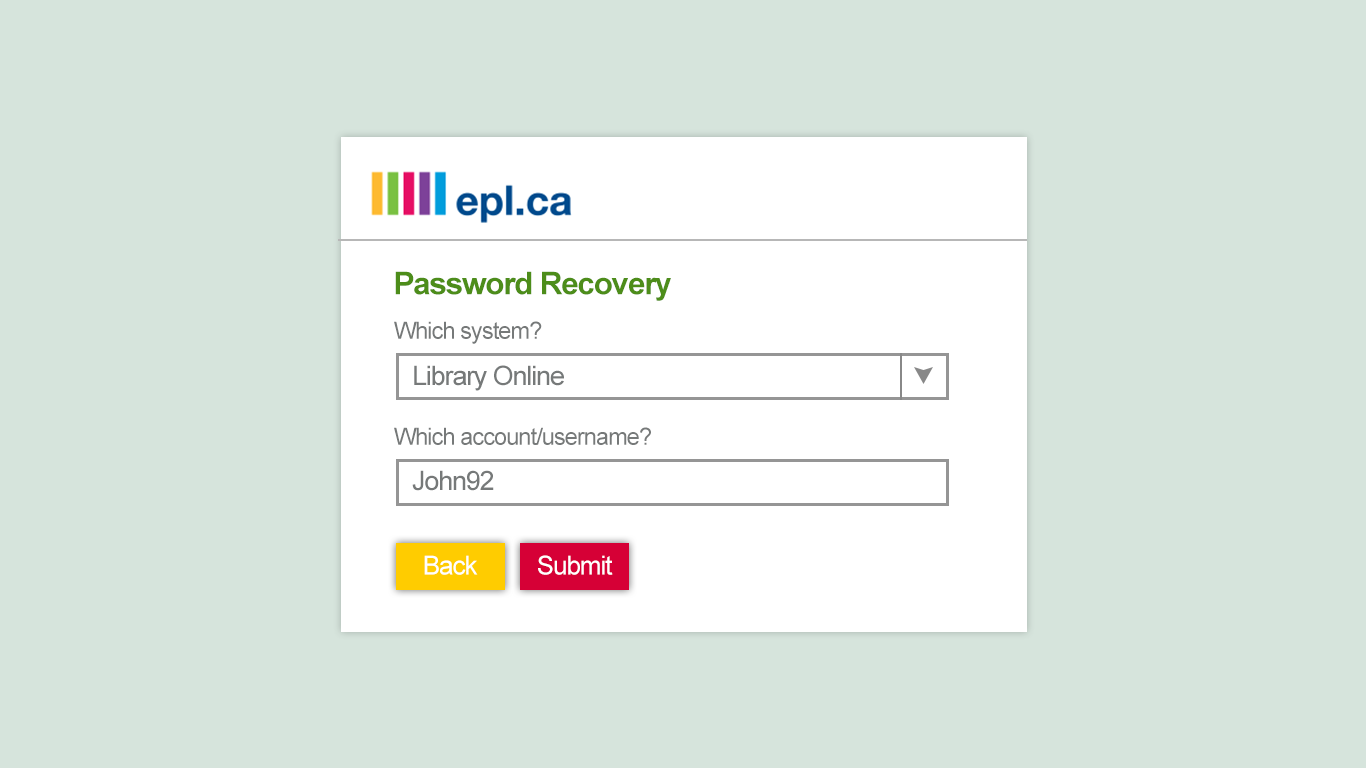
<style>
.page{position:relative;width:1366px;height:768px;background:#d6e4dc}
.page>*{position:absolute;margin:0}
.t1{font:31.5px "Arial-BoldMT";letter-spacing:-0.04em;color:#4d8d1a}
.t2{font:23.6px "ArialMT";letter-spacing:-0.04em;color:#767979}
.t3{font:26.8px "ArialMT";letter-spacing:-0.04em;color:#767979}
.t4{font:26px "ArialMT";letter-spacing:-0.04em;color:#ffffff}
</style>
<div class="page">
<p class="t1" style="left:395px;top:271px;width:276px;height:30px">Password Recovery</p>
<p class="t2" style="left:394px;top:321px;width:148px;height:23px">Which system?</p>
<p class="t3" style="left:414px;top:365px;width:150px;height:26px">Library Online</p>
<p class="t2" style="left:394px;top:427px;width:257px;height:18px">Which account/username?</p>
<p class="t3" style="left:412px;top:470px;width:82px;height:21px">John92</p>
<p class="t4" style="left:424px;top:555px;width:54px;height:20px">Back</p>
<p class="t4" style="left:538px;top:555px;width:75px;height:20px">Submit</p>
</div>
